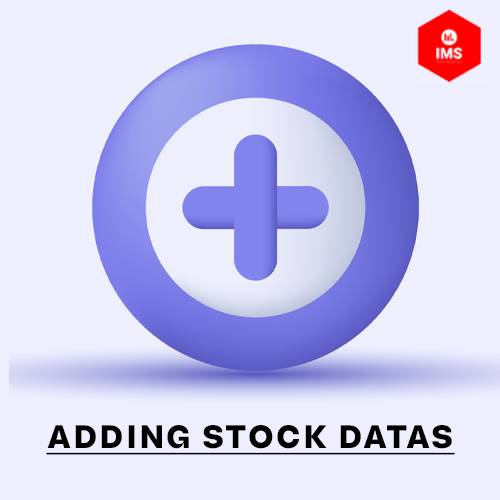
<style>
.page{position:relative;width:500px;height:500px;background:#edefff}
.page>*{position:absolute;margin:0}
.t1{font:32.7px "AnotherGroteskW05-TextBold";color:#000000;text-decoration:underline}
</style>
<div class="page">
<p class="t1" style="left:46px;top:425px;width:409px;height:30px">ADDING STOCK DATAS</p>
</div>
